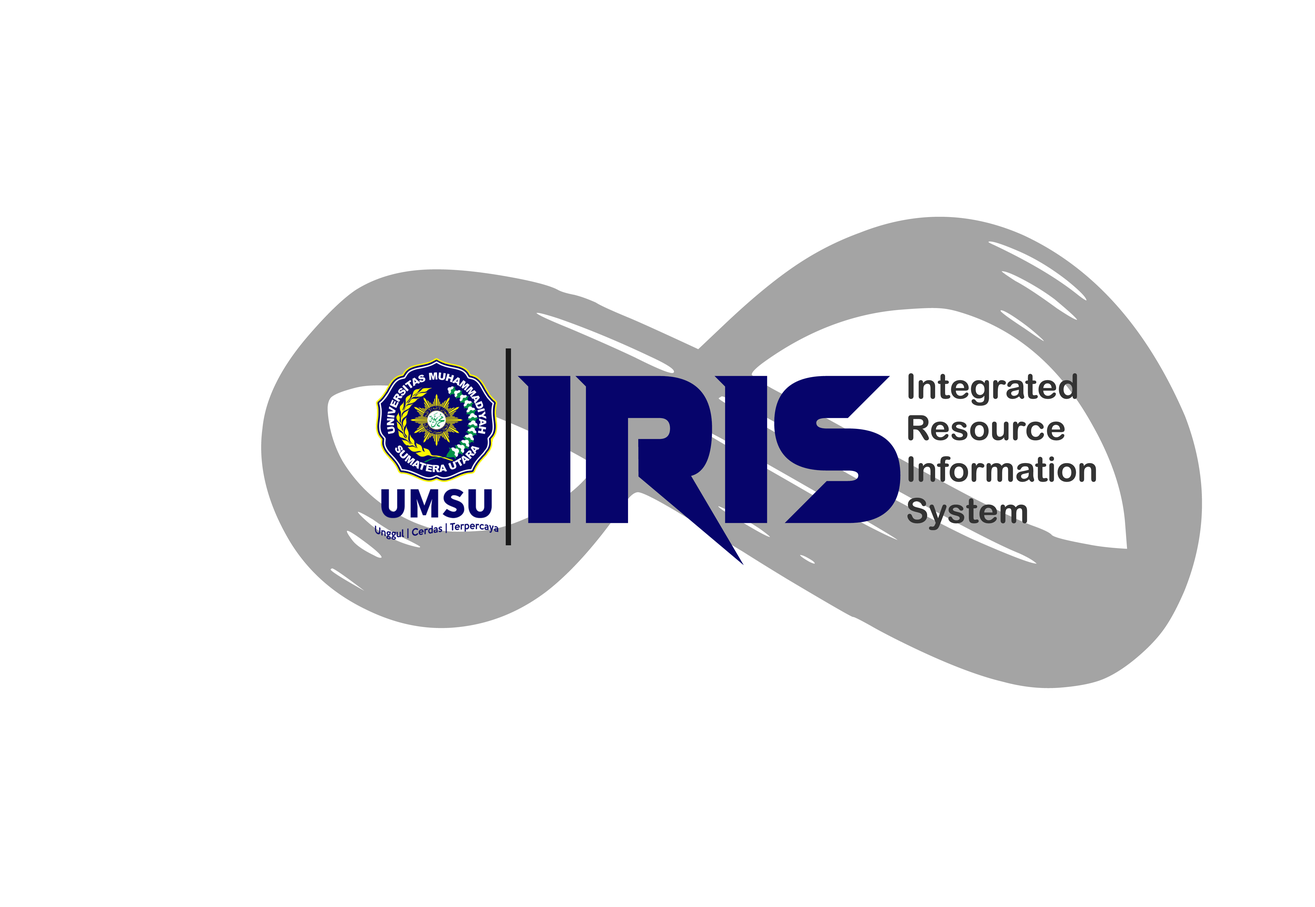
<style>
.page{position:relative;width:1315px;height:907px;background:#ffffff}
.page>*{position:absolute;margin:0}
.t1{font:1061.3px "AestheticViolet";color:#a4a4a4}
.t2{font:215.1px "VampireWars";color:#06046b}
.t3{font:34.6px "ArialRoundedMTBold";color:#333333}
</style>
<div class="page">
<p class="t1" style="left:261px;top:217px;width:941px;height:471px;rotate:86deg">8</p>
<p class="t2" style="left:517px;top:376px;width:383px;height:189px">IRIS</p>
<p class="t3" style="left:907px;top:373px;width:189px;height:157px">Integrated <br>Resource <br>Information <br>System</p>
</div>
